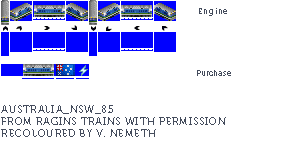
<style>
.page{position:relative;width:300px;height:159px;background:#ffffff}
.page>*{position:absolute;margin:0}
.t1{font:8px "Museo700-Regular";letter-spacing:0.075em;color:#444c5c}
.t2{font:8px "Museo700-Regular";color:#444c5c}
.t3{font:10px "Museo700-Regular";letter-spacing:0.075em;color:#444c5c;text-transform:uppercase}
</style>
<div class="page">
<p class="t1" style="left:199px;top:8px;width:28px;height:8px">Engine</p>
<p class="t2" style="left:197px;top:70px;width:34px;height:6px">Purchase</p>
<p class="t3" style="left:1px;top:105px;width:225px;height:32px">Australia_NSW_85<br>From ragins trains with permission<br>RECOLOURED BY v. nemeth</p>
</div>
